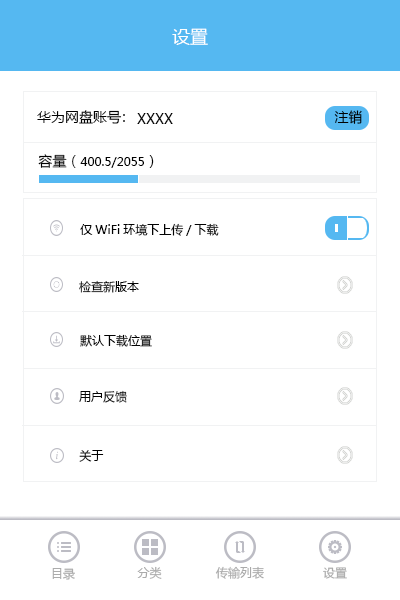
<style>
.page{position:relative;width:400px;height:600px;background:#ffffff}
.page>*{position:absolute;margin:0}
.t1{font:18px "MicrosoftYaHei";color:#ffffff}
.t2{font:14px "MicrosoftYaHei";color:#020202}
.t3{font:14px "MicrosoftYaHei"}
.t4{font:12px "MicrosoftYaHei";color:#020202}
.t5{font:12px "MicrosoftYaHei";color:#aaaaaa}
</style>
<div class="page">
<p class="t1" style="left:172px;top:28px;width:36px;height:17px">设置</p>
<p class="t2" style="left:37px;top:110px;width:85px;height:14px">华为网盘账号</p>
<p class="t2" style="left:137px;top:113px;width:36px;height:11px">XXXX</p>
<p class="t2" style="left:334px;top:110px;width:28px;height:14px">注销</p>
<p class="t3" style="left:123px;top:114px;width:2px;height:8px">：</p>
<p class="t4" style="left:38px;top:154px;width:116px;height:14px"><span class="t2">容量（</span>400.5/2055<span class="t2">）</span></p>
<p class="t4" style="left:80px;top:223px;width:139px;height:13px">仅WiFi环境下上传/下载</p>
<p class="t4" style="left:79px;top:280px;width:60px;height:13px">检查新版本</p>
<p class="t4" style="left:80px;top:334px;width:72px;height:13px">默认下载位置</p>
<p class="t4" style="left:79px;top:390px;width:48px;height:13px">用户反馈</p>
<p class="t4" style="left:79px;top:450px;width:25px;height:12px">关于</p>
<p class="t5" style="left:52px;top:568px;width:23px;height:12px">目录</p>
<p class="t5" style="left:137px;top:566px;width:25px;height:13px">分类</p>
<p class="t5" style="left:215px;top:566px;width:49px;height:13px">传输列表</p>
<p class="t5" style="left:323px;top:567px;width:24px;height:12px">设置</p>
</div>
